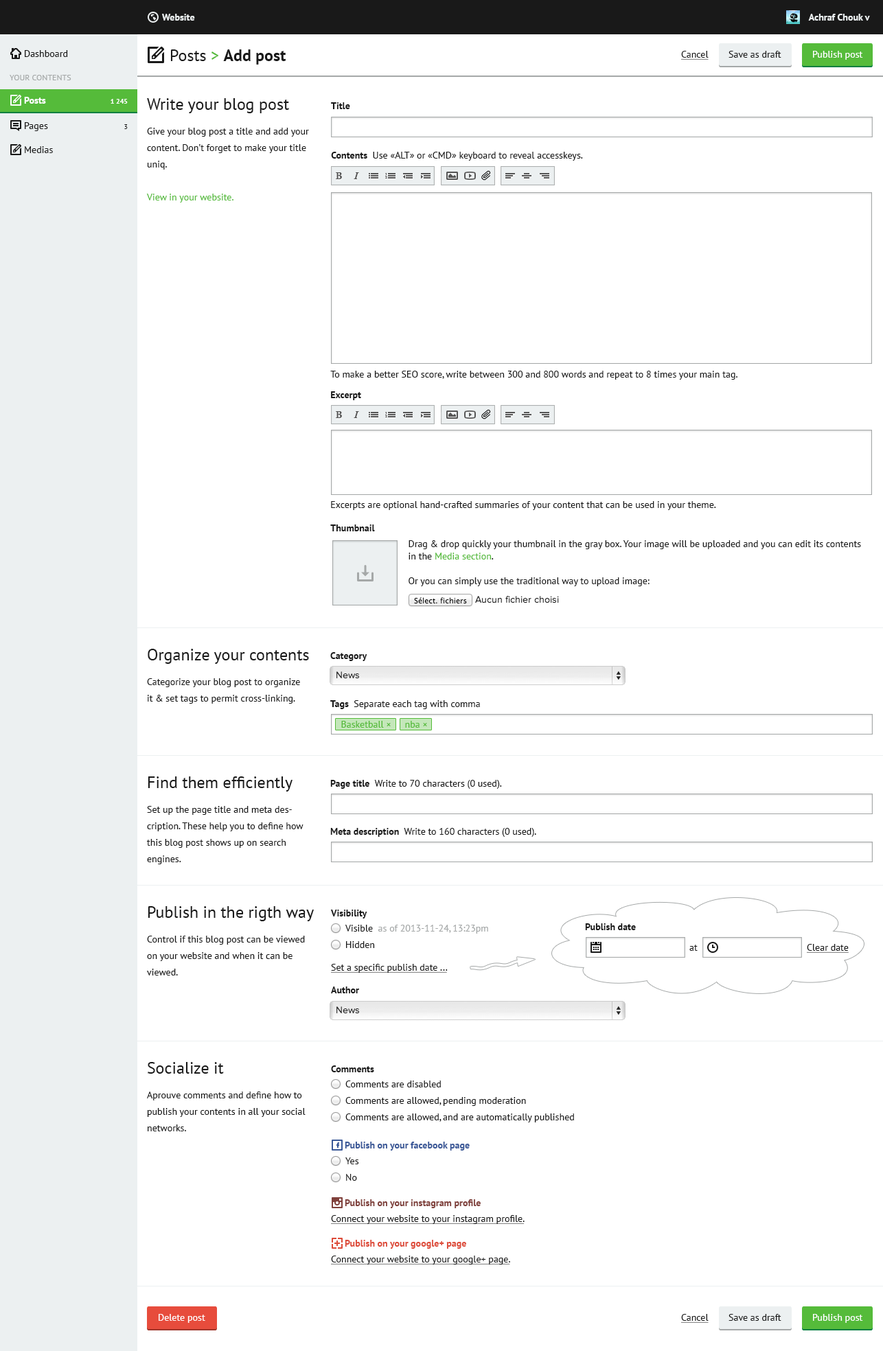
<style>
.page{position:relative;width:883px;height:1351px;background:#ffffff}
.page>*{position:absolute;margin:0}
.t1{font:9.6px "PTSans-Bold";color:#ecf0f1}
.t2{font:9.6px "PTSans-Regular";color:#191919}
.t3{font:16.5px "PTSans-Bold";color:#191919}
.t4{font:16.5px "PTSans-Regular";color:#191919}
.t5{font:16.5px "PTSans-Regular";color:#55bb3a}
.t6{font:9.6px "PTSans-Regular";color:#191919;text-decoration:underline}
.t7{font:9.6px "PTSans-Regular";color:#ffffff}
.t8{font:8.2px "PTSans-Regular";color:#a5a8a8;text-transform:uppercase}
.t9{font:9.6px "PTSans-Bold";color:#ffffff}
.t10{font:6.9px "PTSans-Bold";color:#ffffff}
.t11{font:9.6px "PTSans-Bold";color:#191919}
.t12{font:6.9px "PTSans-Regular";color:#191919}
.t13{font:9.6px/16.5px "PTSans-Regular";color:#191919}
.t14{font:9.6px/16.5px "PTSans-Regular";color:#55bb3a}
.t15{font:9.6px/12.4px "PTSans-Regular";color:#191919}
.t16{font:9.6px/12.4px "PTSans-Regular";color:#55bb3a}
.t17{font:9.6px "PTSans-Regular";color:#55bb3a}
.t18{font:9.6px "PTSans-Regular";color:#a5a8a8}
.t19{font:9.6px "PTSans-Bold";color:#3b5998}
.t20{font:9.6px "PTSans-Bold";color:#80413c}
.t21{font:9.6px "PTSans-Bold";color:#dd4b39}
</style>
<div class="page">
<p class="t1" style="left:162px;top:14px;width:33px;height:7px">Website</p>
<p class="t1" style="left:808px;top:14px;width:62px;height:7px">Achraf Chouk v</p>
<p class="t2" style="left:25px;top:50px;width:43px;height:7px">Dashboard</p>
<p class="t3" style="left:170px;top:49px;width:116px;height:16px"><span class="t4">Posts </span><span class="t5">&gt; </span>Add post</p>
<p class="t6" style="left:681px;top:51px;width:27px;height:9px">Cancel</p>
<p class="t2" style="left:728px;top:51px;width:53px;height:7px">Save as draft</p>
<p class="t7" style="left:813px;top:51px;width:50px;height:9px">Publish post</p>
<p class="t8" style="left:10px;top:75px;width:61px;height:5px">Your contents</p>
<p class="t9" style="left:24px;top:97px;width:22px;height:7px">Posts</p>
<p class="t10" style="left:111px;top:99px;width:17px;height:5px">1 245</p>
<p class="t4" style="left:147px;top:98px;width:142px;height:15px">Write your blog post</p>
<p class="t11" style="left:331px;top:102px;width:19px;height:7px">Title</p>
<p class="t2" style="left:25px;top:122px;width:23px;height:9px">Pages</p>
<p class="t12" style="left:124px;top:124px;width:4px;height:5px">3</p>
<p class="t13" style="left:146px;top:128px;width:163px;height:74px">Give your blog post a title and add your content. Don’t forget to make your title uniq.<br><br><span class="t14">View in your website.</span></p>
<p class="t2" style="left:25px;top:146px;width:28px;height:7px">Medias</p>
<p class="t2" style="left:331px;top:152px;width:252px;height:9px"><span class="t11">Contents</span>  Use «ALT» or «CMD» keyboard to reveal accesskeys.</p>
<p class="t2" style="left:330px;top:371px;width:407px;height:9px">To make a better SEO score, write between 300 and 800 words and repeat to 8 times your main tag.</p>
<p class="t11" style="left:331px;top:391px;width:30px;height:9px">Excerpt</p>
<p class="t2" style="left:331px;top:501px;width:385px;height:9px">Excerpts are optional hand-crafted summaries of your content that can be used in your theme.</p>
<p class="t11" style="left:330px;top:524px;width:45px;height:7px">Thumbnail</p>
<p class="t15" style="left:408px;top:540px;width:453px;height:46px">Drag &amp; drop quickly your thumbnail in the gray box. Your image will be uploaded and you can edit its contents in the <span class="t16">Media section</span>.<br><br>Or you can simply use the traditional way to upload image:</p>
<p class="t4" style="left:148px;top:649px;width:161px;height:15px">Organize your contents</p>
<p class="t11" style="left:330px;top:652px;width:37px;height:9px">Category</p>
<p class="t13" style="left:147px;top:678px;width:153px;height:26px">Categorize your blog post to organize it &amp; set tags to permit cross-linking.</p>
<p class="t2" style="left:330px;top:700px;width:150px;height:9px"><span class="t11">Tags</span>  Separate each tag with comma</p>
<p class="t17" style="left:341px;top:721px;width:50px;height:7px">Basketball ×</p>
<p class="t17" style="left:405px;top:721px;width:22px;height:7px">nba ×</p>
<p class="t4" style="left:148px;top:776px;width:144px;height:15px">Find them efficiently</p>
<p class="t2" style="left:330px;top:780px;width:172px;height:9px"><span class="t11">Page title</span>  Write to 70 characters (0 used).</p>
<p class="t13" style="left:147px;top:806px;width:156px;height:58px">Set up the page title and meta description. These help you to define how this blog post shows up on search engines.</p>
<p class="t2" style="left:330px;top:828px;width:206px;height:9px"><span class="t11">Meta description</span>  Write to 160 characters (0 used).</p>
<p class="t4" style="left:148px;top:906px;width:166px;height:15px">Publish in the rigth way</p>
<p class="t11" style="left:330px;top:909px;width:37px;height:9px">Visibility</p>
<p class="t18" style="left:345px;top:925px;width:143px;height:9px"><span class="t2">Visible</span>  as of 2013-11-24, 13:23pm</p>
<p class="t11" style="left:585px;top:923px;width:51px;height:7px">Publish date</p>
<p class="t13" style="left:147px;top:936px;width:158px;height:39px">Control if this blog post can be viewed on your website and when it can be viewed.</p>
<p class="t2" style="left:346px;top:941px;width:29px;height:7px">Hidden</p>
<p class="t2" style="left:689px;top:945px;width:8px;height:6px">at</p>
<p class="t6" style="left:807px;top:944px;width:41px;height:9px">Clear date</p>
<p class="t6" style="left:331px;top:964px;width:117px;height:9px">Set a specific publish date ...</p>
<p class="t11" style="left:331px;top:986px;width:28px;height:7px">Author</p>
<p class="t4" style="left:148px;top:1062px;width:76px;height:12px">Socialize it</p>
<p class="t11" style="left:331px;top:1065px;width:43px;height:7px">Comments</p>
<p class="t2" style="left:345px;top:1080px;width:96px;height:7px">Comments are disabled</p>
<p class="t13" style="left:147px;top:1091px;width:158px;height:40px">Aprouve comments and define how to publish your contents in all your social networks.</p>
<p class="t2" style="left:345px;top:1097px;width:181px;height:9px">Comments are allowed, pending moderation</p>
<p class="t2" style="left:345px;top:1113px;width:229px;height:9px">Comments are allowed, and are automatically published</p>
<p class="t19" style="left:345px;top:1142px;width:125px;height:8px">Publish on your facebook page</p>
<p class="t2" style="left:345px;top:1157px;width:14px;height:7px">Yes</p>
<p class="t2" style="left:346px;top:1174px;width:11px;height:7px">No</p>
<p class="t20" style="left:345px;top:1199px;width:135px;height:9px">Publish on your instagram profile</p>
<p class="t6" style="left:331px;top:1215px;width:193px;height:9px">Connect your website to your instagram profile.</p>
<p class="t21" style="left:345px;top:1240px;width:121px;height:9px">Publish on your google+ page</p>
<p class="t6" style="left:331px;top:1255px;width:179px;height:9px">Connect your website to your google+ page.</p>
<p class="t7" style="left:159px;top:1314px;width:46px;height:9px">Delete post</p>
<p class="t6" style="left:681px;top:1314px;width:27px;height:9px">Cancel</p>
<p class="t2" style="left:728px;top:1314px;width:53px;height:7px">Save as draft</p>
<p class="t7" style="left:813px;top:1314px;width:50px;height:9px">Publish post</p>
</div>
